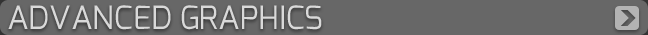
<style>
.page{position:relative;width:648px;height:35px;background:#676767}
.page>*{position:absolute;margin:0}
.t1{font:32px "Exo-Regular";color:#d9d9d9;text-transform:uppercase}
</style>
<div class="page">
<p class="t1" style="left:8px;top:5px;width:314px;height:25px">Advanced Graphics</p>
</div>
